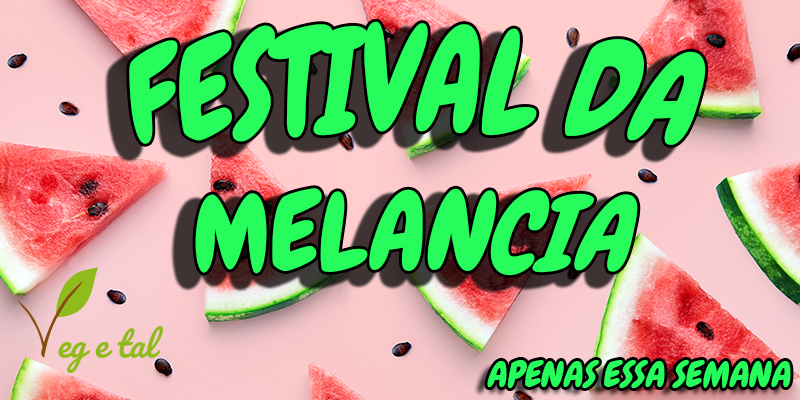
<style>
.page{position:relative;width:800px;height:400px}
.page>*{position:absolute;margin:0}
.t1{font:100px "Chewy-Regular";letter-spacing:-0.005em;color:#26fc5b;font-style:italic}
.t2{font:36px "Chewy-Regular";letter-spacing:-0.005em;color:#26fc5b;font-style:italic}
</style>
<div class="page">
<p class="t1" style="left:129px;top:21px;width:577px;height:255px;text-align:center">FESTIVAL DA MELANCIA</p>
<p class="t2" style="left:487px;top:360px;width:304px;height:28px">APENAS ESSA SEMANA</p>
</div>
